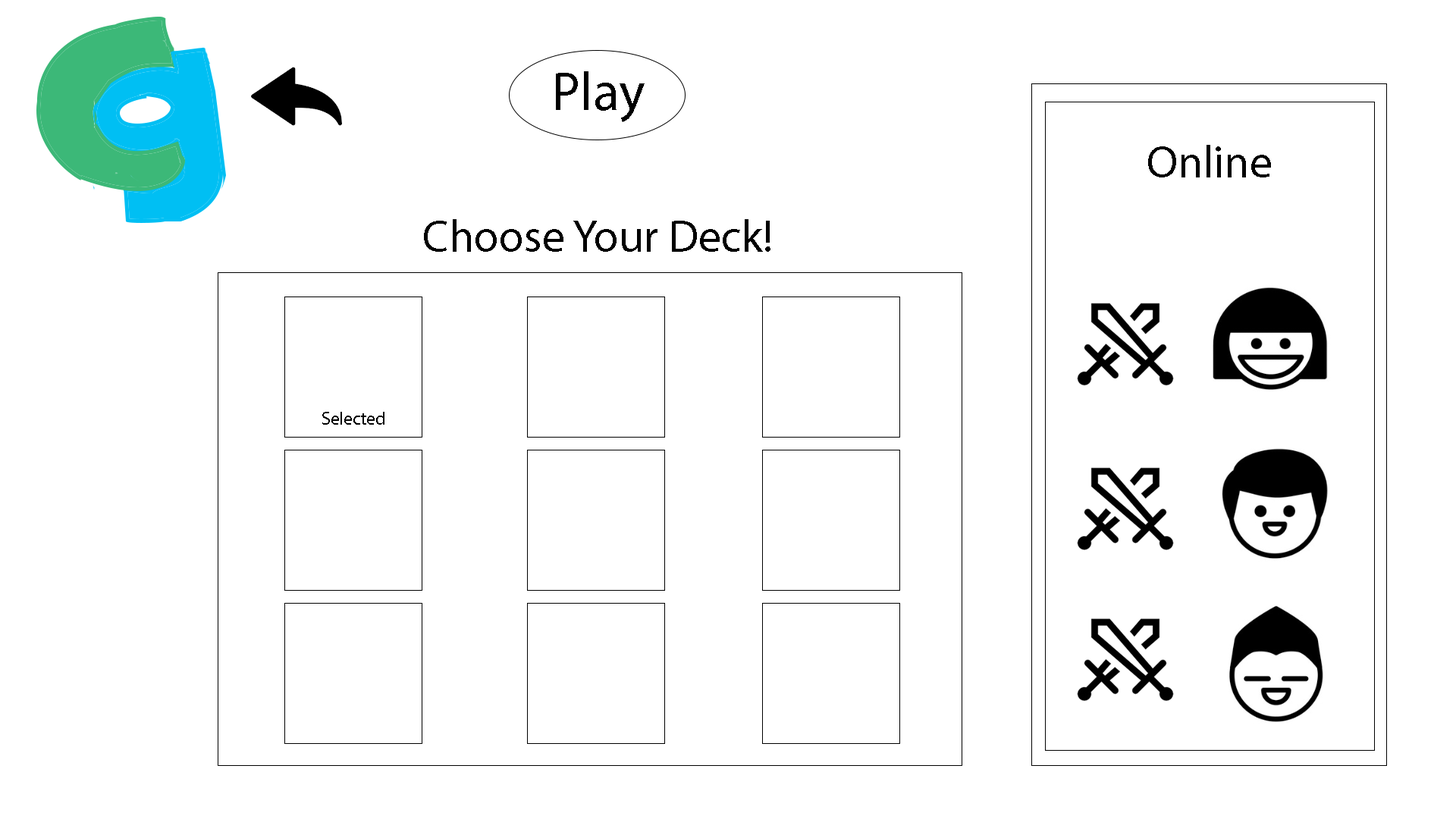
<style>
.page{position:relative;width:1456px;height:819px;background:#ffffff}
.page>*{position:absolute;margin:0}
.t1{font:54.6px "MyriadPro-Regular";color:#000000}
.t2{font:45.5px "MyriadPro-Regular";color:#000000}
.t3{font:18.2px "MyriadPro-Regular";color:#000000}
</style>
<div class="page">
<p class="t1" style="left:556px;top:71px;width:89px;height:51px">Play</p>
<p class="t2" style="left:1148px;top:145px;width:123px;height:32px">Online</p>
<p class="t2" style="left:424px;top:219px;width:346px;height:33px">Choose Your Deck!</p>
<p class="t3" style="left:322px;top:412px;width:62px;height:13px">Selected</p>
</div>
